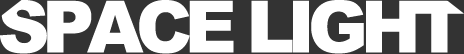
<style>
.page{position:relative;width:464px;height:54px;background:#ffffff}
.page>*{position:absolute;margin:0}
.t1{font:72px "Arial-Black";letter-spacing:-0.1em;color:#ffffff}
</style>
<div class="page">
<p class="t1" style="left:0px;top:0px;width:464px;height:54px">SPACE LIGHT</p>
</div>
